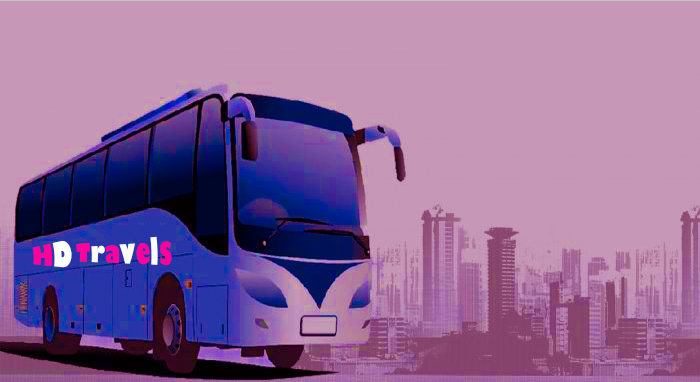
<style>
.page{position:relative;width:700px;height:382px;background:#c697b6}
.page>*{position:absolute;margin:0}
.t1{font:21.3px "GillSans-UltraBold";color:#ff009c}
.t2{font:21.3px "GillSans-UltraBold";color:#ffffff}
.t3{font:21.3px "GillSans-UltraBold";color:#fffdfd}
</style>
<div class="page">
<p class="t1" style="left:32px;top:241px;width:40px;height:27px">H<span class="t2">D</span></p>
<p class="t1" style="left:76px;top:236px;width:96px;height:30px">T<span class="t3">r</span>a<span class="t3">v</span>e<span class="t3">l</span>s</p>
</div>
